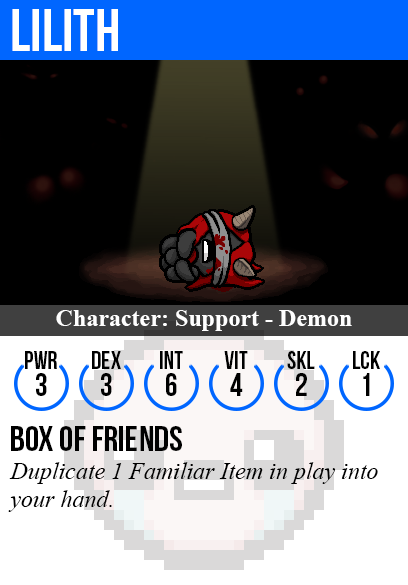
<style>
.page{position:relative;width:408px;height:585px;background:#000000}
.page>*{position:absolute;margin:0}
.t1{font:60px "BebasNeue";color:#ffffff}
.t2{font:24px "TimesNewRomanPS-BoldMT";color:#ffffff}
.t3{font:25px "BebasNeue";color:#000000}
.t4{font:32px "BebasNeue";color:#000000}
.t5{font:36px "BebasNeue";color:#000000}
.t6{font:24px "TimesNewRomanPS-ItalicMT";color:#000000}
</style>
<div class="page">
<p class="t1" style="left:12px;top:9px;width:106px;height:42px">lilith</p>
<p class="t2" style="left:56px;top:310px;width:296px;height:21px">Character: Support - Demon</p>
<p class="t3" style="left:25px;top:351px;width:32px;height:18px">PWR</p>
<p class="t3" style="left:92px;top:351px;width:29px;height:18px">dex</p>
<p class="t3" style="left:160px;top:351px;width:23px;height:18px">int</p>
<p class="t3" style="left:224px;top:351px;width:24px;height:18px">vit</p>
<p class="t3" style="left:287px;top:351px;width:28px;height:18px">skl</p>
<p class="t3" style="left:353px;top:351px;width:27px;height:18px">lck</p>
<p class="t4" style="left:36px;top:373px;width:11px;height:23px">3</p>
<p class="t4" style="left:101px;top:373px;width:11px;height:23px">3</p>
<p class="t4" style="left:166px;top:373px;width:11px;height:23px">6</p>
<p class="t4" style="left:230px;top:373px;width:13px;height:23px">4</p>
<p class="t4" style="left:296px;top:373px;width:11px;height:23px">2</p>
<p class="t4" style="left:363px;top:373px;width:7px;height:23px">1</p>
<p class="t5" style="left:11px;top:426px;width:171px;height:25px">box of friends</p>
<p class="t6" style="left:8px;top:462px;width:370px;height:50px">Duplicate 1 Familiar Item in play into<br>your hand.</p>
</div>
